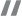
<style>
.page{position:relative;width:22px;height:16px;background:#ffffff}
.page>*{position:absolute;margin:0}
.t1{font:75px "Incised901BT-Light";color:#7e8282}
</style>
<div class="page">
<p class="t1" style="left:0px;top:0px;width:22px;height:16px">“</p>
</div>
